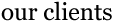
<style>
.page{position:relative;width:113px;height:22px;background:#ffffff}
.page>*{position:absolute;margin:0}
.t1{font:24px "Georgia";color:#000000}
</style>
<div class="page">
<p class="t1" style="left:1px;top:1px;width:111px;height:20px">our clients</p>
</div>
